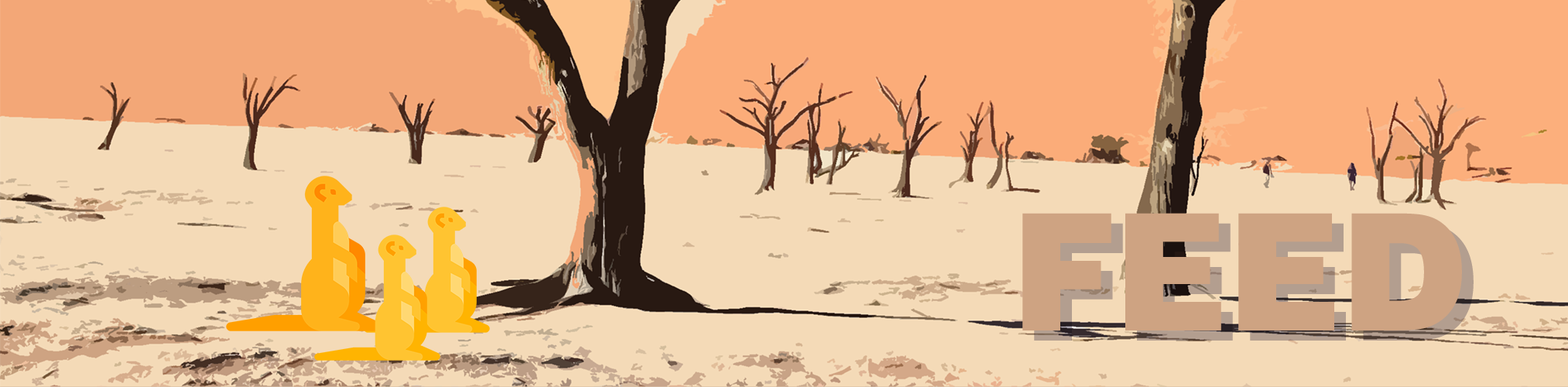
<style>
.page{position:relative;width:1568px;height:387px;background:#f4dab7}
.page>*{position:absolute;margin:0}
.t1{font:162.4px "Swiss721BT-Black";color:#cea382}
</style>
<div class="page">
<p class="t1" style="left:1022px;top:213px;width:440px;height:117px">FEED</p>
</div>
